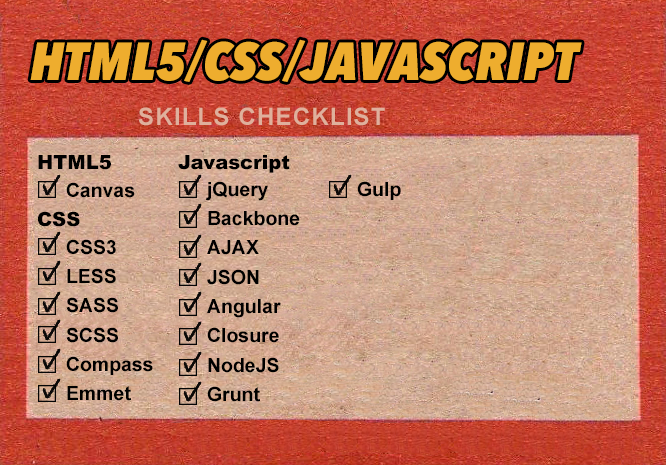
<style>
.page{position:relative;width:666px;height:465px}
.page>*{position:absolute;margin:0}
.t1{font:53px "AvenirNextCondensed-HeavyItalic";letter-spacing:0.01em;color:#eead2e}
.t2{font:24px "Arial-BoldMT";letter-spacing:0.05em;color:#dfb09c}
.t3{font:19.6px "Arial-Black";color:#000000}
.t4{font:19.6px "Arial-BoldMT";color:#000000}
</style>
<div class="page">
<p class="t1" style="left:30px;top:39px;width:552px;height:43px">HTML5/CSS/JAVASCRIPT</p>
<p class="t2" style="left:138px;top:107px;width:247px;height:19px">SKILLS CHECKLIST</p>
<p class="t3" style="left:38px;top:155px;width:73px;height:15px">HTML5</p>
<p class="t3" style="left:178px;top:155px;width:112px;height:18px">Javascript</p>
<p class="t4" style="left:66px;top:182px;width:69px;height:16px">Canvas</p>
<p class="t4" style="left:206px;top:181px;width:94px;height:221px">jQuery<br>Backbone<br>AJAX<br>JSON<br>Angular<br>Closure<br>NodeJS<br>Grunt</p>
<p class="t4" style="left:357px;top:181px;width:44px;height:19px">Gulp</p>
<p class="t3" style="left:38px;top:211px;width:42px;height:16px">CSS</p>
<p class="t4" style="left:66px;top:239px;width:87px;height:162px">CSS3<br>LESS<br>SASS<br>SCSS<br>Compass<br>Emmet</p>
</div>
